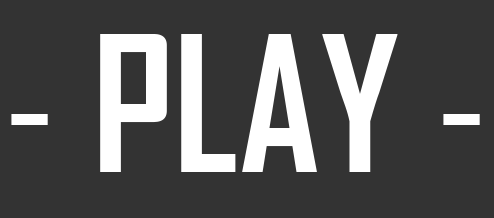
<style>
.page{position:relative;width:494px;height:218px;background:#333333}
.page>*{position:absolute;margin:0}
.t1{font:180px "AgencyFB-Bold";color:#ffffff}
.t2{font:180px "AgencyFB-Reg";color:#ffffff}
</style>
<div class="page">
<p class="t1" style="left:11px;top:34px;width:469px;height:138px"><span class="t2">- </span>PLAY<span class="t2"> -</span></p>
</div>
